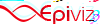
<style>
.page{position:relative;width:100px;height:24px;background:#ffffff}
.page>*{position:absolute;margin:0}
.t1{font:23.1px "BauhausITCbyBT-Medium";scale:1.05 1}
.t2{font:23.1px "BauhausITCbyBT-Light";scale:1.05 1}
.t3{font:26.8px "ARDECODE";color:#13ffff}
</style>
<div class="page">
<p class="t1" style="left:40px;top:1px;width:54px;height:21px">Epi<span class="t2">viz</span></p>
<p class="t3" style="left:89px;top:10px;width:11px;height:12px">2</p>
</div>
